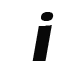
<style>
.page{position:relative;width:81px;height:83px;background:#ffffff}
.page>*{position:absolute;margin:0}
.t1{font:72px "BritannicBold";color:#080808;font-style:italic}
</style>
<div class="page">
<p class="t1" style="left:32px;top:12px;width:22px;height:49px">i</p>
</div>
